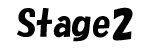
<style>
.page{position:relative;width:150px;height:50px;background:#ffffff}
.page>*{position:absolute;margin:0}
.t1{font:36px "HGPSoeiKakupoptai";color:#000000}
</style>
<div class="page">
<p class="t1" style="left:17px;top:7px;width:116px;height:35px">Stage2</p>
</div>
